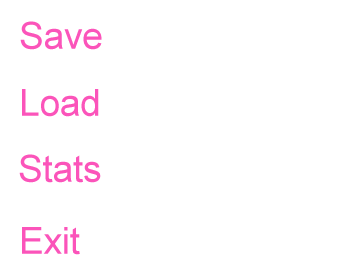
<style>
.page{position:relative;width:359px;height:271px;background:#ffffff}
.page>*{position:absolute;margin:0}
.t1{font:37.3px "ArialMT";letter-spacing:-0.01em;color:#fb54ba}
</style>
<div class="page">
<p class="t1" style="left:20px;top:21px;width:82px;height:29px">Save</p>
<p class="t1" style="left:22px;top:89px;width:77px;height:28px">Load</p>
<p class="t1" style="left:19px;top:154px;width:82px;height:29px">Stats</p>
<p class="t1" style="left:22px;top:227px;width:58px;height:28px">Exit</p>
</div>
